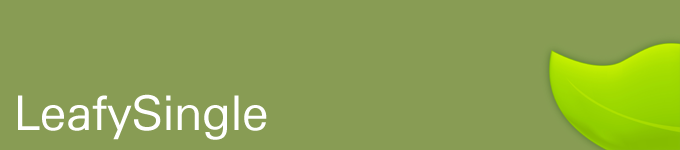
<style>
.page{position:relative;width:680px;height:150px;background:#889c54}
.page>*{position:absolute;margin:0}
.t1{font:48px "a_ReportSans";color:#ffffff}
</style>
<div class="page">
<p class="t1" style="left:18px;top:94px;width:249px;height:46px">LeafySingle</p>
</div>
